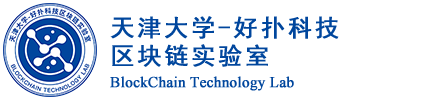
<style>
.page{position:relative;width:425px;height:100px;background:#ffffff}
.page>*{position:absolute;margin:0}
.t1{font:15px/23px "TimesNewRomanPSMT";color:#00469d;font-weight:bold}
.t2{font:24px/28px "SimHei";letter-spacing:0.1em;color:#00469d;font-weight:bold}
</style>
<div class="page">
<p class="t1" style="left:110px;top:16px;width:229px;height:75px"><span class="t2">天津大学-好扑科技<br>区块链实验室<br></span>BlockChain Technology Lab</p>
</div>
